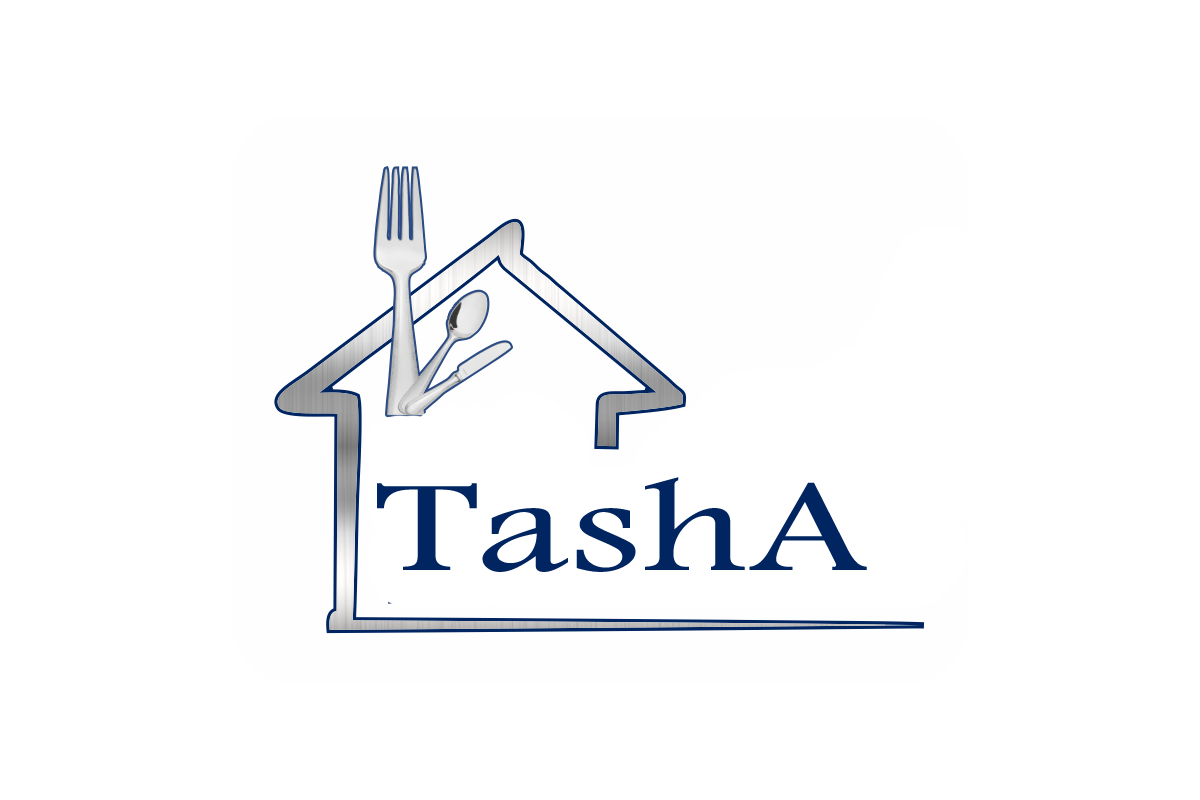
<style>
.page{position:relative;width:1200px;height:800px;background:#ffffff}
.page>*{position:absolute;margin:0}
.t1{font:133.9px "FootlightMTLight";color:#002561;scale:1.46 1}
</style>
<div class="page">
<p class="t1" style="left:377px;top:477px;width:490px;height:95px">TashA</p>
</div>
